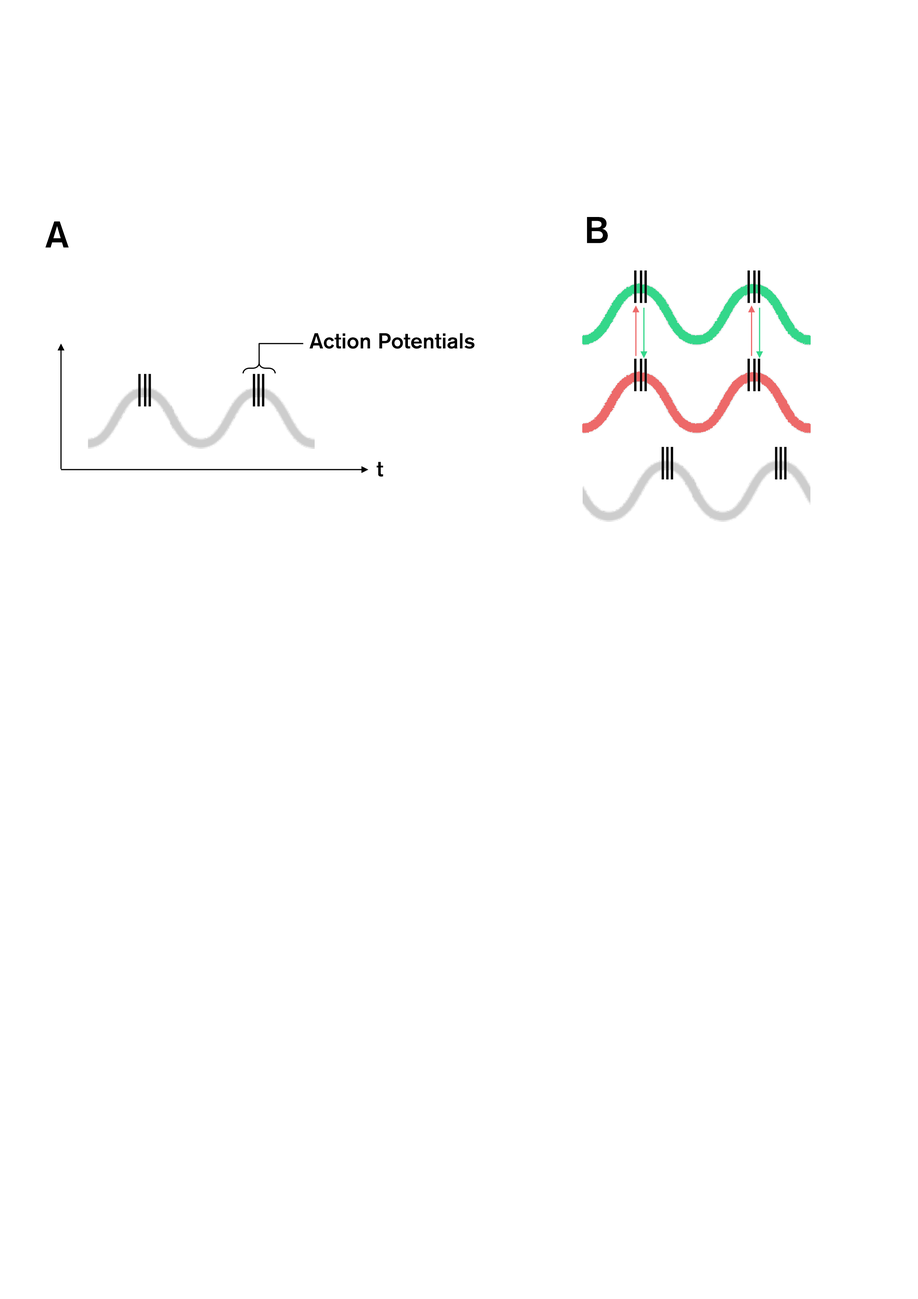
<style>
.page{position:relative;width:918px;height:1299px;background:#ffffff}
.page>*{position:absolute;margin:0}
.t1{font:37px "AkzidenzGroteskBQ-Medium";color:#000000}
.t2{font:21.6px "AkzidenzGroteskBQ-Medium";color:#000000}
</style>
<div class="page">
<p class="t1" style="left:45px;top:221px;width:24px;height:27px">A</p>
<p class="t1" style="left:587px;top:217px;width:21px;height:26px">B</p>
<p class="t2" style="left:310px;top:333px;width:165px;height:16px">Action Potentials</p>
<p class="t2" style="left:377px;top:462px;width:6px;height:14px">t</p>
</div>
